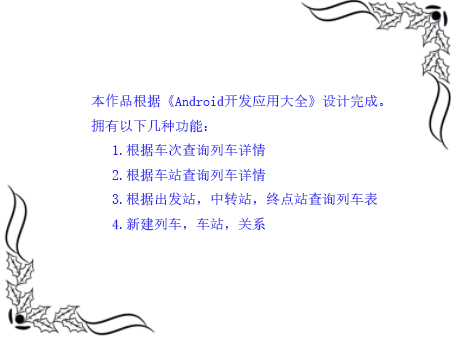
<style>
.page{position:relative;width:454px;height:340px;background:#ffffff}
.page>*{position:absolute;margin:0}
.t1{font:14px "SimSun";color:#231eea}
</style>
<div class="page">
<p class="t1" style="left:91px;top:94px;width:293px;height:137px">本作品根据《Android开发应用大全》设计完成。<br>拥有以下几种功能：<br>   1.根据车次查询列车详情<br>   2.根据车站查询列车详情<br>   3.根据出发站，中转站，终点站查询列车表<br>   4.新建列车，车站，关系</p>
</div>
